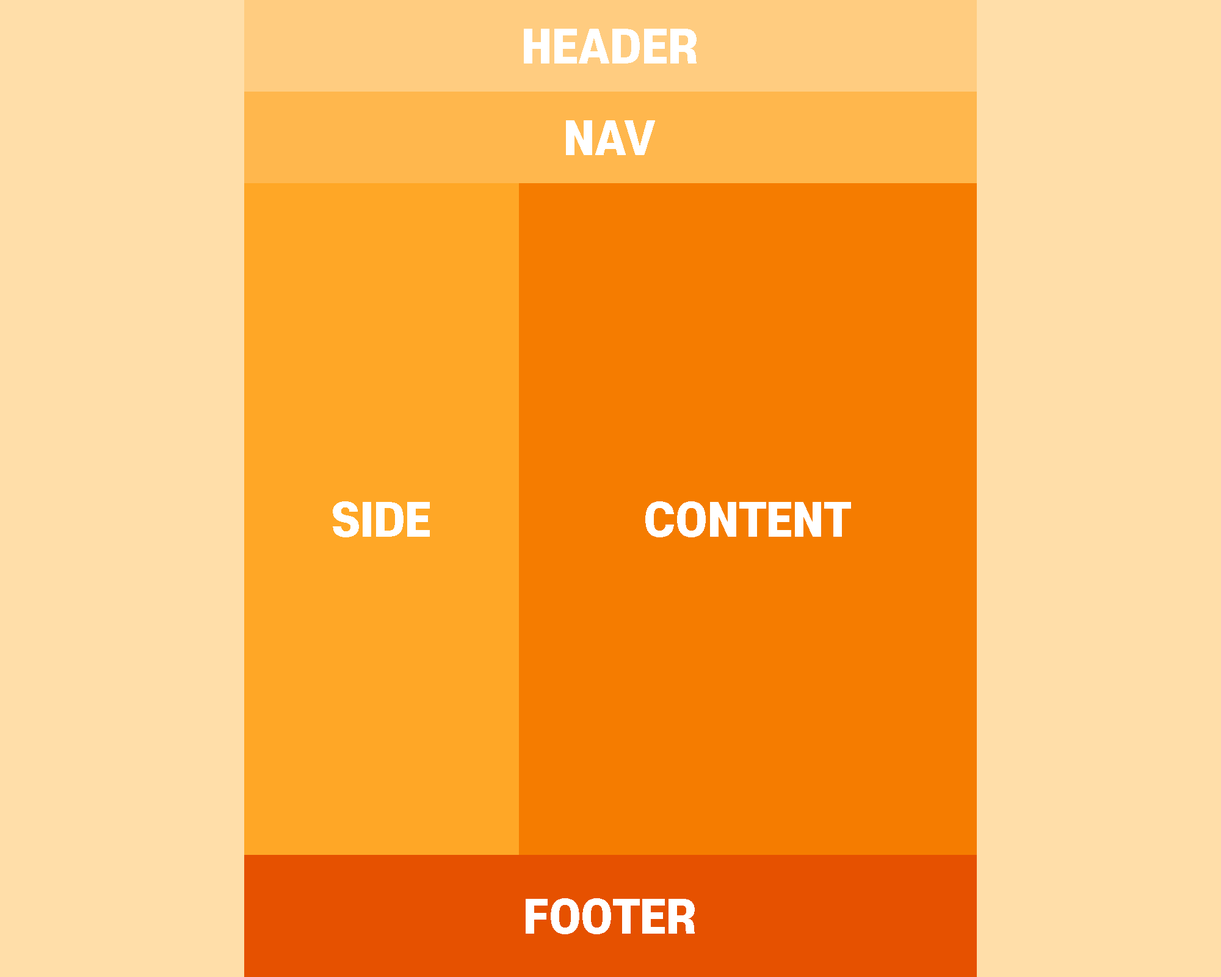
<style>
.page{position:relative;width:1221px;height:977px;background:#ffdea9}
.page>*{position:absolute;margin:0}
.t1{font:44px "S-CoreDream-8Heavy";color:#ffffff}
</style>
<div class="page">
<p class="t1" style="left:524px;top:29px;width:173px;height:34px">HEADER</p>
<p class="t1" style="left:566px;top:120px;width:89px;height:35px">NAV</p>
<p class="t1" style="left:333px;top:501px;width:97px;height:36px">SIDE</p>
<p class="t1" style="left:645px;top:501px;width:206px;height:36px">CONTENT</p>
<p class="t1" style="left:526px;top:898px;width:169px;height:36px">FOOTER</p>
</div>
